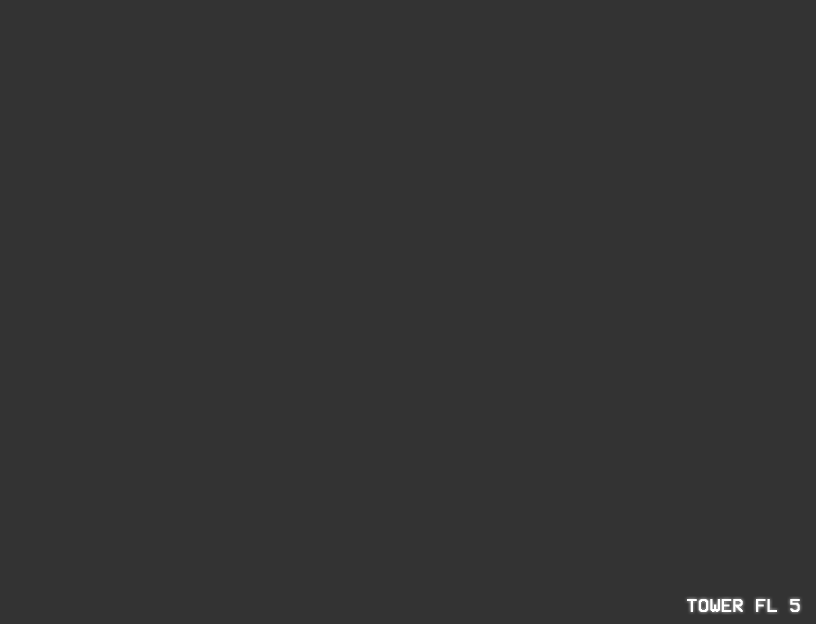
<style>
.page{position:relative;width:816px;height:624px;background:#333333}
.page>*{position:absolute;margin:0}
.t1{font:18.7px "VCROSDMono";color:#ffffff;font-weight:bold}
</style>
<div class="page">
<p class="t1" style="left:687px;top:599px;width:113px;height:13px">TOWER FL 5</p>
</div>
